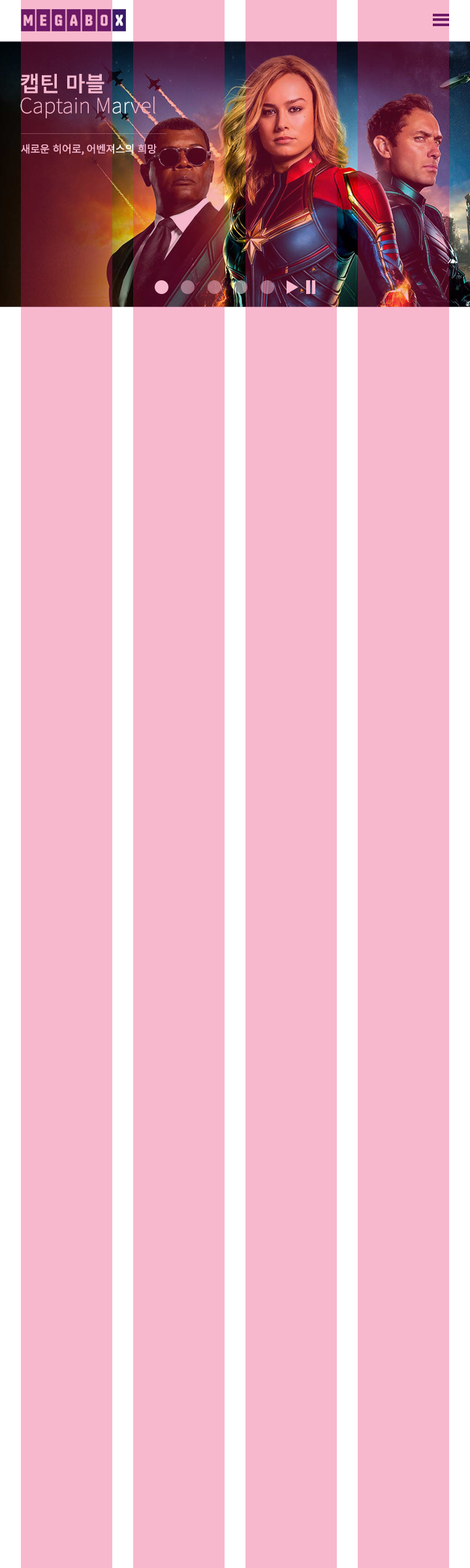
<style>
.page{position:relative;width:470px;height:1568px;background:#f7b8ce}
.page>*{position:absolute;margin:0}
.t1{font:21.6px "NotoSansCJKkr-Medium";color:#f7b8ce}
.t2{font:20.9px "NotoSansCJKkr-Thin";color:#f7b8ce}
.t3{font:10.5px "NotoSansCJKkr-Regular";color:#f7b8ce}
</style>
<div class="page">
<p class="t1" style="left:21px;top:73px;width:84px;height:20px">캡틴 마블</p>
<p class="t2" style="left:20px;top:96px;width:135px;height:22px">Captain Marvel</p>
<p class="t3" style="left:21px;top:144px;width:136px;height:11px">새로운 히어로, 어벤져스의 희망</p>
</div>
